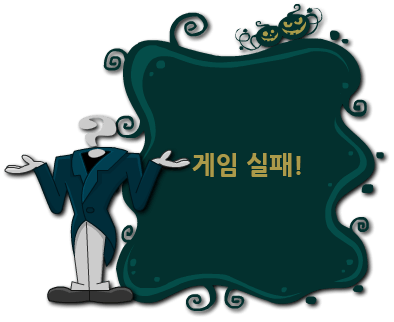
<style>
.page{position:relative;width:394px;height:322px;background:#03302e}
.page>*{position:absolute;margin:0}
.t1{font:25px "NanumGothicExtraBold";color:#ab9a4a}
</style>
<div class="page">
<p class="t1" style="left:192px;top:153px;width:109px;height:24px">게임 실패!</p>
</div>
